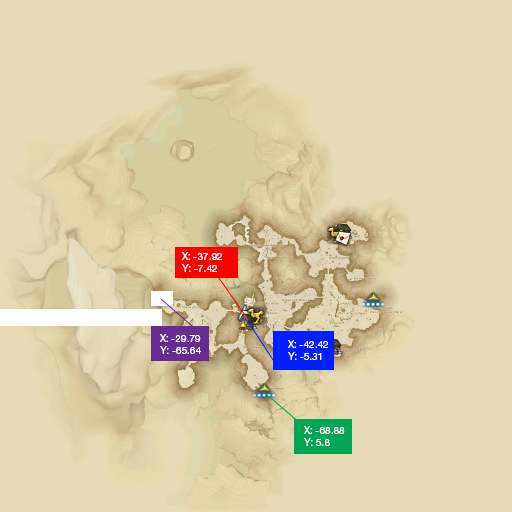
<style>
.page{position:relative;width:512px;height:512px;background:#e6dab4}
.page>*{position:absolute;margin:0}
.t1{font:10px "HelveticaNeueLTPro-Roman";color:#ffffff}
</style>
<div class="page">
<p class="t1" style="left:182px;top:252px;width:40px;height:20px;text-align:right">X: -37.92<br>Y: -7.42</p>
<p class="t1" style="left:160px;top:334px;width:41px;height:20px;text-align:right">X: -29.79<br>Y: -65.64</p>
<p class="t1" style="left:288px;top:340px;width:40px;height:20px;text-align:right">X: -42.42<br>Y: -5.31</p>
<p class="t1" style="left:304px;top:426px;width:41px;height:20px;text-align:right">X: -68.88<br>Y: 5.8</p>
</div>
